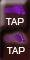
<style>
.page{position:relative;width:30px;height:60px}
.page>*{position:absolute;margin:0}
.t1{font:10.7px "SimianText-Orangutan";color:#ffffff}
</style>
<div class="page">
<p class="t1" style="left:5px;top:18px;width:19px;height:7px">TAP</p>
<p class="t1" style="left:6px;top:47px;width:19px;height:7px">TAP</p>
</div>
